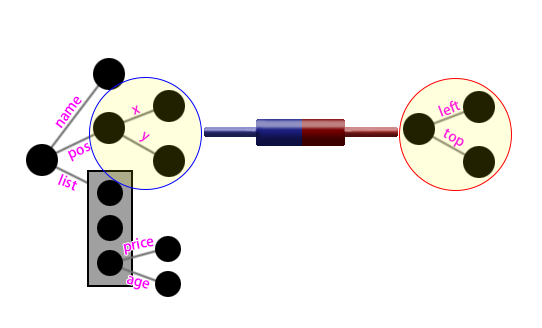
<style>
.page{position:relative;width:542px;height:328px;background:#ffffff}
.page>*{position:absolute;margin:0}
.t1{font:14px "AdobeHeitiStd-Regular";color:#ff00ff}
.t2{font:14px "AdobeHeitiStd-Regular";color:#ff21de}
</style>
<div class="page">
<p class="t1" style="left:55px;top:96px;width:27px;height:33px;rotate:-53deg">name</p>
<p class="t2" style="left:438px;top:100px;width:23px;height:17px;rotate:-21deg">left</p>
<p class="t2" style="left:131px;top:105px;width:10px;height:10px;rotate:-21deg">x</p>
<p class="t2" style="left:139px;top:131px;width:12px;height:11px;rotate:31deg">y</p>
<p class="t2" style="left:443px;top:128px;width:21px;height:19px;rotate:29deg">top</p>
<p class="t1" style="left:67px;top:143px;width:24px;height:19px;rotate:-24deg">pos</p>
<p class="t1" style="left:58px;top:174px;width:20px;height:17px;rotate:22deg">list</p>
<p class="t1" style="left:123px;top:238px;width:31px;height:17px;rotate:-11deg">price</p>
<p class="t1" style="left:126px;top:276px;width:24px;height:14px;rotate:16deg">age</p>
</div>
